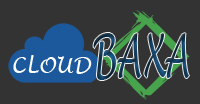
<style>
.page{position:relative;width:200px;height:104px;background:#333333}
.page>*{position:absolute;margin:0}
.t1{font:58.5px "LucidaHandwriting-Italic";scale:0.57 1}
.t2{font:21.9px "LucidaHandwriting-Italic";color:#ffffff;scale:0.93 1}
</style>
<div class="page">
<p class="t1" style="left:93px;top:33px;width:96px;height:47px">BAXA</p>
<p class="t2" style="left:13px;top:55px;width:79px;height:19px">CLOUD</p>
</div>
